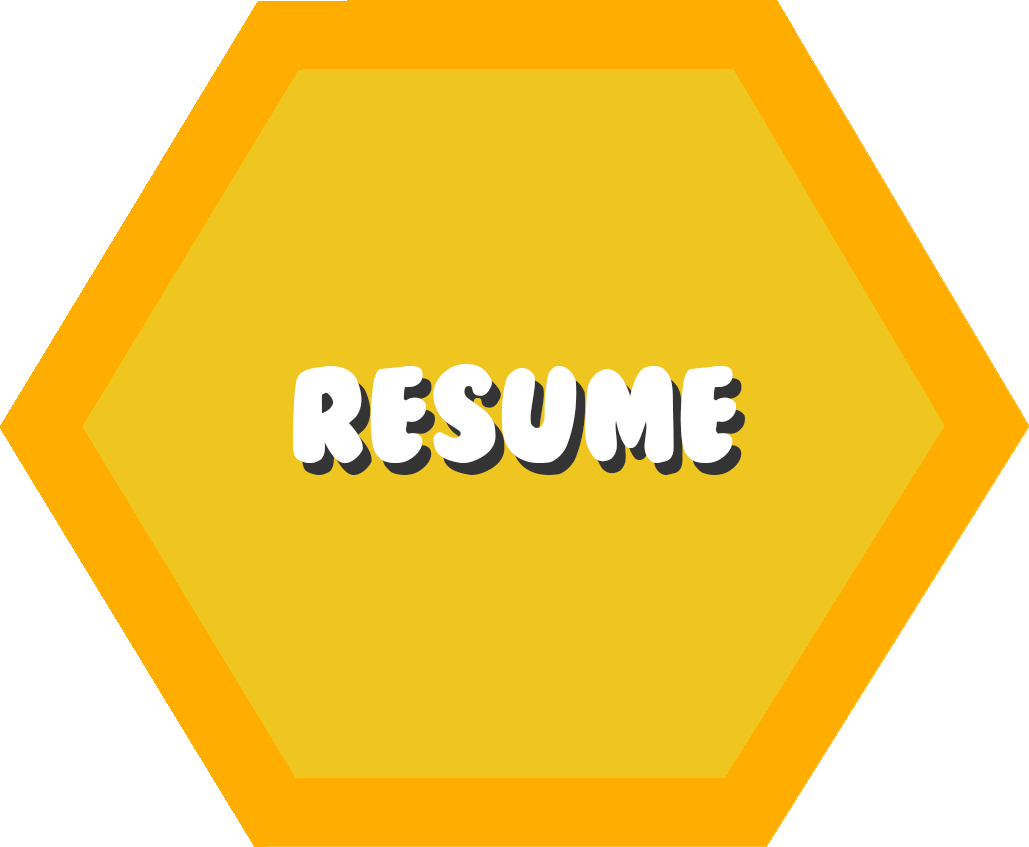
<style>
.page{position:relative;width:1029px;height:847px;background:#efc620}
.page>*{position:absolute;margin:0}
.t1{font:125px "BubbleGum";color:#ffffff}
</style>
<div class="page">
<p class="t1" style="left:293px;top:364px;width:443px;height:100px">RESUME</p>
</div>
